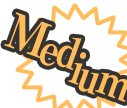
<style>
.page{position:relative;width:127px;height:108px;background:#ffffff}
.page>*{position:absolute;margin:0}
.t1{font:43.6px "RyuminPro-ExBold";letter-spacing:-0.08em;color:#ffbc5c;scale:0.9 1}
.t2{font:48px "RyuminPro-ExBold";letter-spacing:-0.08em;color:#ffbc5c;scale:0.9 1}
</style>
<div class="page">
<p class="t1" style="left:4px;top:12px;width:124px;height:90px;rotate:20deg"><span class="t2">M</span>edium</p>
</div>
